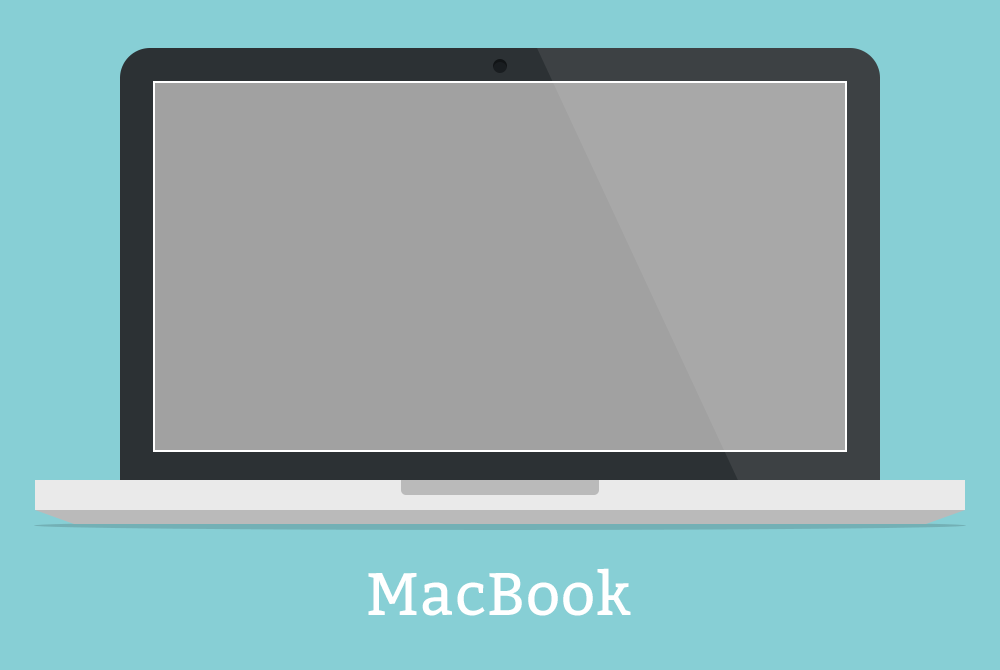
<style>
.page{position:relative;width:1000px;height:670px;background:#87cfd5}
.page>*{position:absolute;margin:0}
.t1{font:60px "Bitter-Regular";letter-spacing:0.02em;color:#ffffff}
</style>
<div class="page">
<p class="t1" style="left:368px;top:568px;width:263px;height:48px">MacBook</p>
</div>
